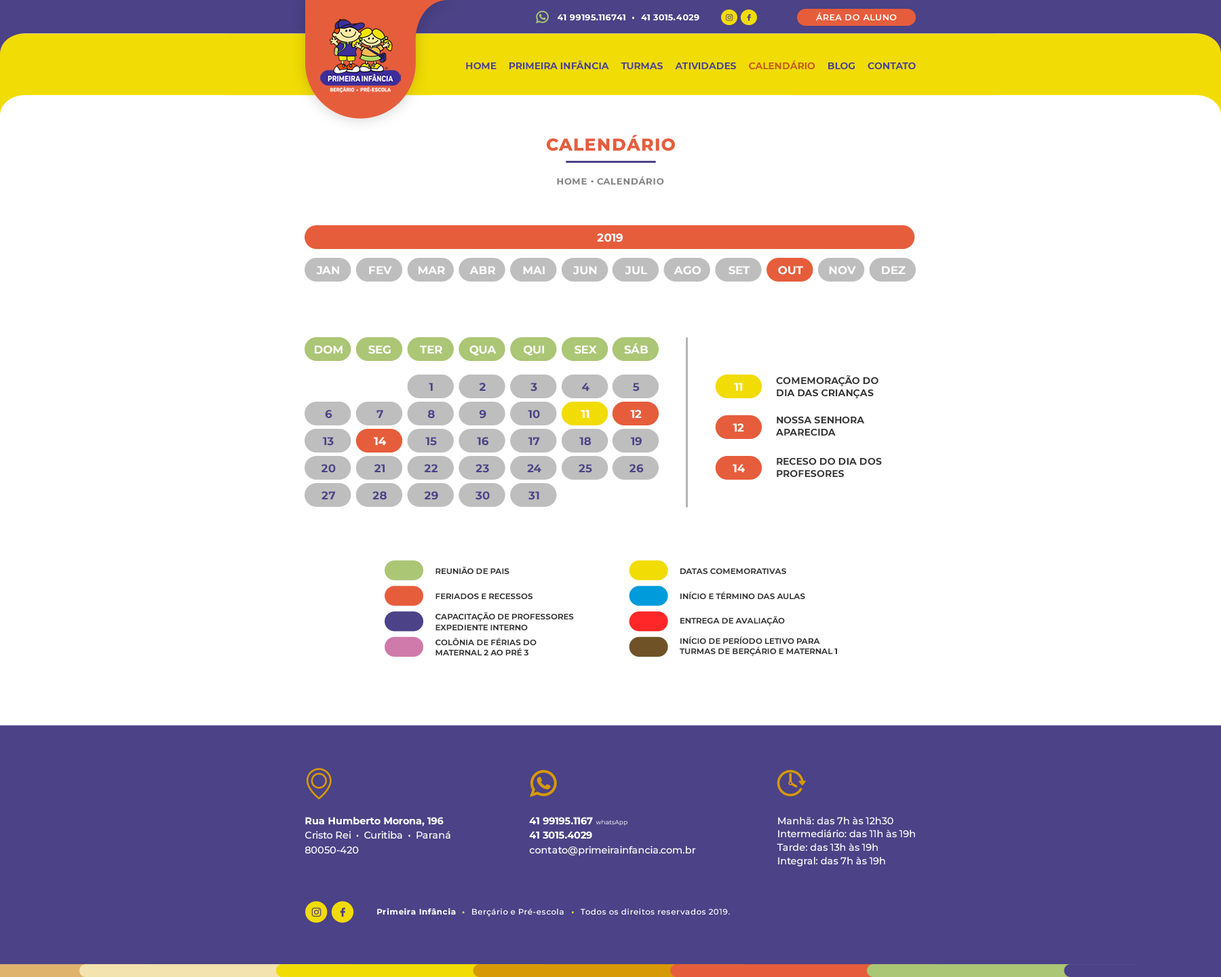
<style>
.page{position:relative;width:1221px;height:977px;background:#ffffff}
.page>*{position:absolute;margin:0}
.t1{font:8.4px "Montserrat-Bold";letter-spacing:0.05em;color:#ffffff}
.t2{font:8.4px "Montserrat-SemiBold";letter-spacing:0.055em;color:#ffffff;text-transform:uppercase}
.t3{font:9.5px "Montserrat-Bold";color:#4b4287;text-transform:uppercase}
.t4{font:9.5px "Montserrat-Bold";color:#c45b1f;text-transform:uppercase}
.t5{font:17.1px "Montserrat-ExtraBold";letter-spacing:0.05em;color:#e65d3c;text-transform:uppercase}
.t6{font:8.8px "Montserrat-Bold";letter-spacing:0.05em;color:#818181;text-transform:uppercase}
.t7{font:11.2px "Montserrat-Bold";color:#ffffff}
.t8{font:9.5px/12.2px "Montserrat-Bold";color:#343434}
.t9{font:11.2px "Montserrat-Bold";color:#4b4287}
.t10{font:7.9px "Montserrat-Bold";color:#343434}
.t11{font:7.9px/10.2px "Montserrat-Bold";color:#343434}
.t12{font:9.8px/14.7px "Montserrat-Medium";color:#ffffff}
.t13{font:9.8px/14.7px "Montserrat-Bold";color:#ffffff}
.t14{font:6.1px/14.7px "Montserrat-Regular";color:#ffffff}
.t15{font:9.8px/13.4px "Montserrat-Medium";color:#ffffff}
.t16{font:7.9px "Montserrat-Medium";letter-spacing:0.055em;color:#ffffff}
.t17{font:7.9px "Montserrat-Bold";letter-spacing:0.055em;color:#ffffff}
.t18{font:7.9px "Montserrat-Bold";letter-spacing:0.055em;color:#f2dc05}
</style>
<div class="page">
<p class="t1" style="left:558px;top:14px;width:141px;height:7px">41 99195.116741  •  41 3015.4029</p>
<p class="t2" style="left:816px;top:12px;width:81px;height:8px">Área do aluno</p>
<p class="t3" style="left:466px;top:60px;width:450px;height:10px">home     Primeira Infância     Turmas     Atividades     <span class="t4">Calendário   </span>  Blog     Contato</p>
<p class="t5" style="left:546px;top:134px;width:129px;height:17px">Calendário</p>
<p class="t6" style="left:557px;top:176px;width:107px;height:9px">hOME • Calendário</p>
<p class="t7" style="left:597px;top:233px;width:26px;height:9px">2019</p>
<p class="t7" style="left:316px;top:266px;width:23px;height:9px">JAN</p>
<p class="t7" style="left:369px;top:266px;width:23px;height:8px">FEV</p>
<p class="t7" style="left:418px;top:266px;width:27px;height:8px">MAR</p>
<p class="t7" style="left:469px;top:266px;width:27px;height:8px">ABR</p>
<p class="t7" style="left:523px;top:266px;width:22px;height:8px">MAI</p>
<p class="t7" style="left:572px;top:266px;width:25px;height:9px">JUN</p>
<p class="t7" style="left:625px;top:266px;width:22px;height:9px">JUL</p>
<p class="t7" style="left:674px;top:266px;width:27px;height:9px">AGO</p>
<p class="t7" style="left:728px;top:266px;width:22px;height:9px">SET</p>
<p class="t7" style="left:778px;top:266px;width:25px;height:9px">OUT</p>
<p class="t7" style="left:829px;top:266px;width:27px;height:9px">NOV</p>
<p class="t7" style="left:882px;top:266px;width:23px;height:8px">DEZ</p>
<p class="t7" style="left:315px;top:345px;width:28px;height:9px">DOM</p>
<p class="t7" style="left:368px;top:345px;width:23px;height:9px">SEG</p>
<p class="t7" style="left:420px;top:345px;width:22px;height:8px">TER</p>
<p class="t7" style="left:469px;top:345px;width:27px;height:10px">QUA</p>
<p class="t7" style="left:524px;top:345px;width:20px;height:10px">QUI</p>
<p class="t7" style="left:574px;top:345px;width:23px;height:9px">SEX</p>
<p class="t7" style="left:624px;top:343px;width:24px;height:11px">SÁB</p>
<p class="t8" style="left:776px;top:375px;width:102px;height:24px">COMEMORAÇÃO DO<br>DIA DAS CRIANÇAS</p>
<p class="t9" style="left:429px;top:383px;width:4px;height:8px">1</p>
<p class="t9" style="left:479px;top:383px;width:7px;height:8px">2</p>
<p class="t9" style="left:530px;top:383px;width:7px;height:8px">3</p>
<p class="t9" style="left:582px;top:383px;width:7px;height:8px">4</p>
<p class="t9" style="left:633px;top:383px;width:7px;height:8px">5</p>
<p class="t7" style="left:734px;top:383px;width:9px;height:8px">11</p>
<p class="t9" style="left:325px;top:410px;width:7px;height:8px">6</p>
<p class="t9" style="left:376px;top:410px;width:7px;height:8px">7</p>
<p class="t9" style="left:427px;top:410px;width:8px;height:8px">8</p>
<p class="t9" style="left:479px;top:410px;width:7px;height:8px">9</p>
<p class="t9" style="left:528px;top:410px;width:12px;height:8px">10</p>
<p class="t7" style="left:581px;top:410px;width:8px;height:8px">11</p>
<p class="t7" style="left:630px;top:410px;width:12px;height:8px">12</p>
<p class="t7" style="left:733px;top:423px;width:11px;height:8px">12</p>
<p class="t8" style="left:775px;top:416px;width:90px;height:20px">NOSSA SENHORA<br>APARECIDA</p>
<p class="t9" style="left:322px;top:437px;width:12px;height:9px">13</p>
<p class="t7" style="left:374px;top:437px;width:12px;height:8px">14</p>
<p class="t9" style="left:425px;top:437px;width:12px;height:9px">15</p>
<p class="t9" style="left:477px;top:437px;width:11px;height:9px">16</p>
<p class="t9" style="left:528px;top:437px;width:12px;height:8px">17</p>
<p class="t9" style="left:579px;top:437px;width:12px;height:9px">18</p>
<p class="t9" style="left:630px;top:437px;width:12px;height:9px">19</p>
<p class="t8" style="left:777px;top:457px;width:105px;height:20px">RECESO DO DIA DOS<br>PROFESORES</p>
<p class="t9" style="left:321px;top:464px;width:15px;height:9px">20</p>
<p class="t9" style="left:374px;top:464px;width:11px;height:8px">21</p>
<p class="t9" style="left:424px;top:464px;width:13px;height:8px">22</p>
<p class="t9" style="left:475px;top:464px;width:14px;height:9px">23</p>
<p class="t9" style="left:527px;top:464px;width:14px;height:8px">24</p>
<p class="t9" style="left:579px;top:464px;width:13px;height:9px">25</p>
<p class="t9" style="left:629px;top:464px;width:15px;height:9px">26</p>
<p class="t7" style="left:733px;top:464px;width:12px;height:8px">14</p>
<p class="t9" style="left:321px;top:491px;width:14px;height:8px">27</p>
<p class="t9" style="left:372px;top:491px;width:15px;height:9px">28</p>
<p class="t9" style="left:424px;top:491px;width:14px;height:9px">29</p>
<p class="t9" style="left:475px;top:491px;width:15px;height:9px">30</p>
<p class="t9" style="left:528px;top:491px;width:11px;height:9px">31</p>
<p class="t10" style="left:435px;top:566px;width:74px;height:8px">REUNIÃO DE PAIS</p>
<p class="t10" style="left:680px;top:568px;width:106px;height:6px">DATAS COMEMORATIVAS</p>
<p class="t10" style="left:435px;top:593px;width:98px;height:7px">FERIADOS E RECESSOS</p>
<p class="t10" style="left:680px;top:591px;width:125px;height:9px">INÍCIO E TÉRMINO DAS AULAS</p>
<p class="t11" style="left:435px;top:612px;width:139px;height:19px">CAPACITAÇÃO DE PROFESSORES<br>EXPEDIENTE INTERNO</p>
<p class="t10" style="left:680px;top:616px;width:105px;height:9px">ENTREGA DE AVALIAÇÃO</p>
<p class="t11" style="left:435px;top:638px;width:102px;height:18px">COLÔNIA DE FÉRIAS DO<br>MATERNAL 2 AO PRÉ 3</p>
<p class="t11" style="left:680px;top:636px;width:157px;height:20px">INÍCIO DE PERÍODO LETIVO PARA<br>TURMAS DE BERÇÁRIO E MATERNAL 1</p>
<p class="t12" style="left:305px;top:817px;width:145px;height:36px"><span class="t13">Rua Humberto Morona, 196<br></span>Cristo Rei  •  Curitiba  •  Paraná<br>80050-420</p>
<p class="t12" style="left:529px;top:817px;width:167px;height:38px"><span class="t13">41 99195.1167 </span><span class="t14">whatsApp<br></span><span class="t13">41 3015.4029<br></span>contato@primeirainfancia.com.br</p>
<p class="t15" style="left:777px;top:817px;width:138px;height:49px">Manhã: das 7h às 12h30<br>Intermediário: das 11h às 19h<br>Tarde: das 13h às 19h<br>Integral: das 7h às 19h</p>
<p class="t16" style="left:377px;top:908px;width:353px;height:8px"><span class="t17">Primeira Infância  </span><span class="t18">•  </span>Berçário e Pré-escola   <span class="t18">•  </span>Todos os direitos reservados 2019.</p>
</div>
